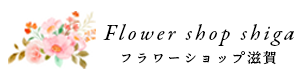
<style>
.page{position:relative;width:300px;height:80px;background:#ffffff}
.page>*{position:absolute;margin:0}
.t1{font:22px "GaramondPremrPro-It";letter-spacing:0.14em;color:#000000}
.t2{font:14px "TenMincho-It";letter-spacing:0.14em;color:#000000}
</style>
<div class="page">
<p class="t1" style="left:103px;top:24px;width:191px;height:22px">Flower shop shiga</p>
<p class="t2" style="left:122px;top:51px;width:154px;height:14px">フラワーショップ滋賀</p>
</div>
